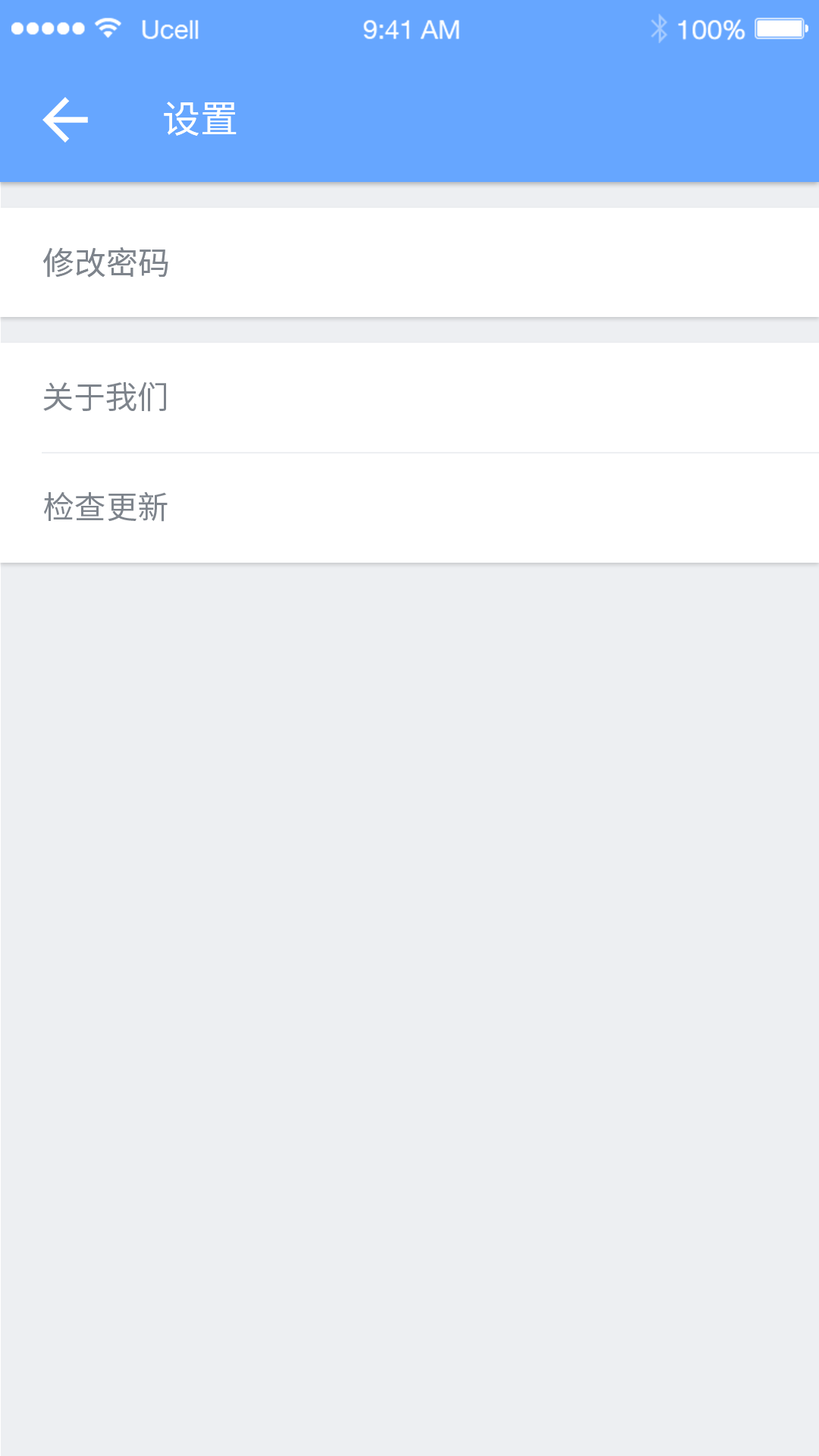
<style>
.page{position:relative;width:819px;height:1456px;background:#edeff2}
.page>*{position:absolute;margin:0}
.t1{font:37.9px "NotoSansHans-Regular";color:#ffffff}
.t2{font:31.8px "NotoSansHans-Regular";color:#7e848c}
</style>
<div class="page">
<p class="t1" style="left:164px;top:102px;width:73px;height:34px">设置</p>
<p class="t2" style="left:43px;top:247px;width:125px;height:31px">修改密码</p>
<p class="t2" style="left:43px;top:381px;width:123px;height:31px">关于我们</p>
<p class="t2" style="left:44px;top:491px;width:124px;height:31px">检查更新</p>
</div>
